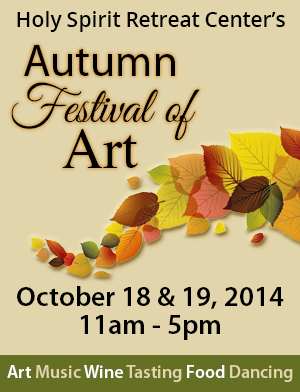
<style>
.page{position:relative;width:300px;height:392px;background:#e2d5ab}
.page>*{position:absolute;margin:0}
.t1{font:21px "OpenSans-Semibold";color:#000000}
.t2{font:52px/30px "GreatVibes-Regular";color:#000000}
.t3{font:45px/30px "MyriadPro-Regular";color:#000000}
.t4{font:57px/30px "Times-Roman";color:#000000}
.t5{font:28px/12px "MyriadPro-Semibold";color:#000000}
.t6{font:18px "MyriadPro-Semibold";color:#e2d5ab}
.t7{font:18px "MyriadPro-Semibold";color:#ffffff}
</style>
<div class="page">
<p class="t1" style="left:17px;top:11px;width:268px;height:21px">Holy Spirit Retreat Center’s</p>
<p class="t2" style="left:11px;top:45px;width:189px;height:123px;text-align:center"><span class="t3">Autumn <br></span>Festival of <br><span class="t4">Art</span></p>
<p class="t5" style="left:17px;top:286px;width:267px;height:54px;text-align:center">October 18 &amp; 19, 2014<br>11am - 5pm</p>
<p class="t6" style="left:7px;top:365px;width:286px;height:17px"><span class="t7">Art </span>Music <span class="t7">Wine </span>Tasting <span class="t7">Food </span>Dancing</p>
</div>
